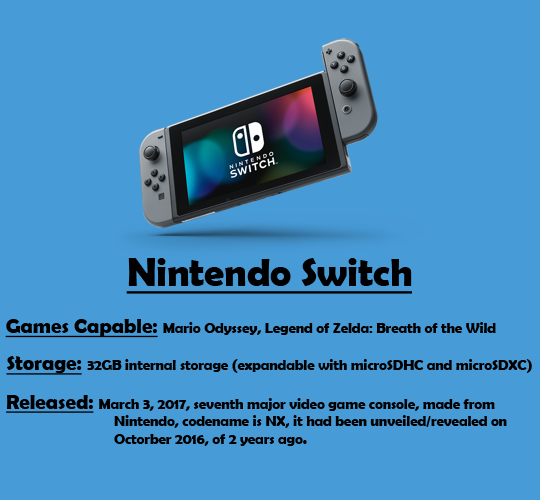
<style>
.page{position:relative;width:540px;height:500px;background:#479bd7}
.page>*{position:absolute;margin:0}
.t1{font:39.6px "BerlinSansFBDemi-Bold";color:#000000;text-decoration:underline}
.t2{font:14.6px "BerlinSansFBDemi-Bold";color:#000000}
.t3{font:20.8px "BerlinSansFBDemi-Bold";color:#000000;text-decoration:underline}
</style>
<div class="page">
<p class="t1" style="left:126px;top:258px;width:286px;height:36px">Nintendo Switch</p>
<p class="t2" style="left:5px;top:319px;width:491px;height:19px"><span class="t3">Games Capable: </span>Mario Odyssey, Legend of Zelda: Breath of the Wild</p>
<p class="t2" style="left:6px;top:356px;width:526px;height:19px"><span class="t3">Storage: </span>32GB internal storage (expandable with microSDHC and microSDXC)</p>
<p class="t2" style="left:6px;top:395px;width:501px;height:51px"><span class="t3">Released: </span>March 3, 2017, seventh major video game console, made from <br>   Nintendo, codename is NX, it had been unveiled/revealed on <br>   Octorber 2016, of 2 years ago.</p>
</div>
